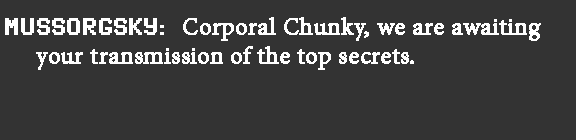
<style>
.page{position:relative;width:576px;height:140px;background:#333333}
.page>*{position:absolute;margin:0}
.t1{font:24px "MinionPro-Regular";color:#ffffff;font-weight:bold}
.t2{font:24px "SynchroLET";color:#ffffff;font-weight:bold}
</style>
<div class="page">
<p class="t1" style="left:5px;top:17px;width:536px;height:53px"><span class="t2">MUSSORGSKY:  </span>Corporal Chunky, we are awaiting <br>     your transmission of the top secrets.</p>
</div>
